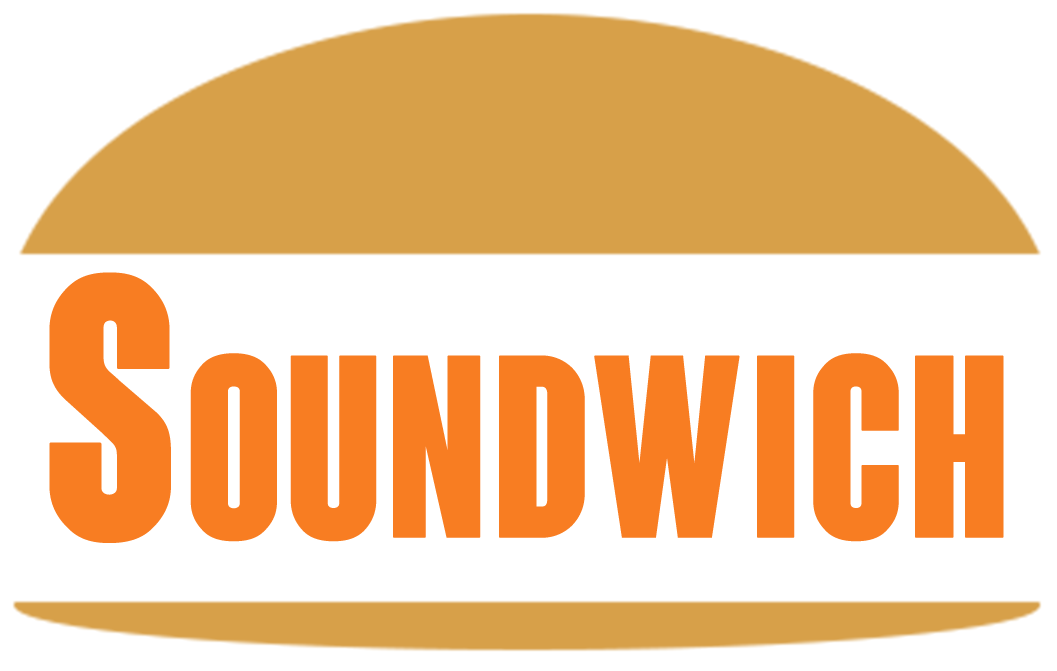
<style>
.page{position:relative;width:1057px;height:671px;background:#ffffff}
.page>*{position:absolute;margin:0}
.t1{font:250.9px "Coluna-CondensedBold";color:#f87d22;font-weight:bold}
.t2{font:361.3px "Coluna-CondensedBold";color:#f87d22;font-weight:bold}
</style>
<div class="page">
<p class="t1" style="left:49px;top:272px;width:955px;height:271px"><span class="t2">S</span>oundwich</p>
</div>
